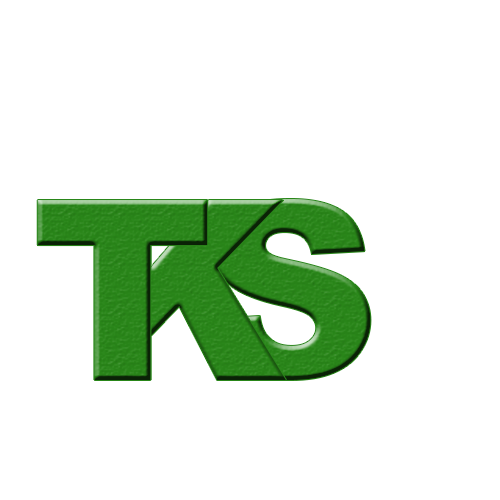
<style>
.page{position:relative;width:500px;height:500px;background:#ffffff}
.page>*{position:absolute;margin:0}
.t1{font:252.4px "Arial-Black";color:#298619}
.t2{font:244.7px "Arial-Black";color:#298619}
</style>
<div class="page">
<p class="t1" style="left:37px;top:200px;width:171px;height:180px">T</p>
<p class="t1" style="left:94px;top:200px;width:192px;height:180px">K</p>
<p class="t2" style="left:206px;top:199px;width:165px;height:181px">S</p>
</div>
